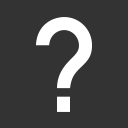
<style>
.page{position:relative;width:128px;height:128px;background:#333333}
.page>*{position:absolute;margin:0}
.t1{font:125.9px "ITCAvantGardePro-Md";letter-spacing:0.02em;color:#ffffff;text-transform:uppercase}
</style>
<div class="page">
<p class="t1" style="left:35px;top:17px;width:57px;height:95px">?</p>
</div>
